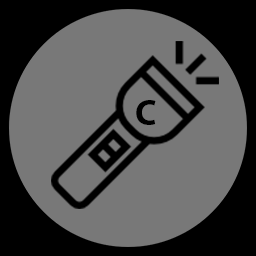
<style>
.page{position:relative;width:256px;height:256px;background:#787878}
.page>*{position:absolute;margin:0}
.t1{font:36px "MyriadPro-Bold";color:#000000}
</style>
<div class="page">
<p class="t1" style="left:136px;top:100px;width:20px;height:25px">C</p>
</div>
